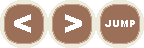
<style>
.page{position:relative;width:144px;height:48px;background:#9c6f58}
.page>*{position:absolute;margin:0}
.t1{font:10px "Arial-Black";color:#ffffff}
</style>
<div class="page">
<p class="t1" style="left:105px;top:20px;width:30px;height:7px">JUMP</p>
</div>
